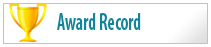
<style>
.page{position:relative;width:211px;height:47px;background:#ffffff}
.page>*{position:absolute;margin:0}
.t1{font:24px "MyriadPro-SemiboldCond";color:#11839a;scale:0.78 1}
</style>
<div class="page">
<p class="t1" style="left:57px;top:13px;width:84px;height:17px">Award Record</p>
</div>
